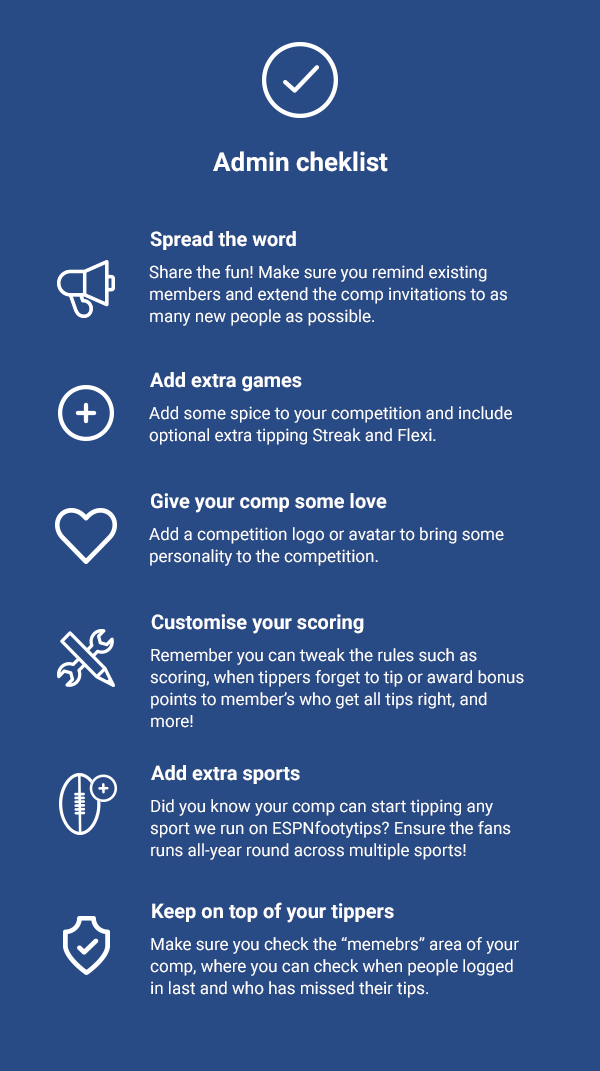
<style>
.page{position:relative;width:600px;height:1071px;background:#284a85}
.page>*{position:absolute;margin:0}
.t1{font:26px "Roboto-Bold";color:#ffffff}
.t2{font:20px "Roboto-Bold";color:#ffffff}
.t3{font:17px/22px "Roboto-Regular";color:#ffffff}
</style>
<div class="page">
<p class="t1" style="left:213px;top:151px;width:175px;height:21px">Admin cheklist</p>
<p class="t2" style="left:150px;top:231px;width:146px;height:19px">Spread the word</p>
<p class="t3" style="left:149px;top:265px;width:358px;height:61px">Share the fun! Make sure you remind existing members and extend the comp invitations to as many new people as possible.</p>
<p class="t2" style="left:150px;top:372px;width:152px;height:20px">Add extra games</p>
<p class="t3" style="left:149px;top:406px;width:363px;height:39px">Add some spice to your competition and include optional extra tipping Streak and Flexi.</p>
<p class="t2" style="left:151px;top:493px;width:236px;height:20px">Give your comp some love</p>
<p class="t3" style="left:149px;top:527px;width:355px;height:39px">Add a competition logo or avatar to bring some personality to the competition.</p>
<p class="t2" style="left:151px;top:614px;width:213px;height:20px">Customise your scoring</p>
<p class="t3" style="left:150px;top:648px;width:374px;height:80px">Remember you can tweak the rules such as scoring, when tippers forget to tip or award bonus points to member’s who get all tips right, and more!</p>
<p class="t2" style="left:151px;top:765px;width:149px;height:19px">Add extra sports</p>
<p class="t3" style="left:150px;top:799px;width:361px;height:61px">Did you know your comp can start tipping any sport we run on ESPNfootytips? Ensure the fans runs all-year round across multiple sports!</p>
<p class="t2" style="left:152px;top:902px;width:242px;height:21px">Keep on top of your tippers</p>
<p class="t3" style="left:150px;top:937px;width:369px;height:61px">Make sure you check the “memebrs” area of your comp, where you can check when people logged in last and who has missed their tips.</p>
</div>
